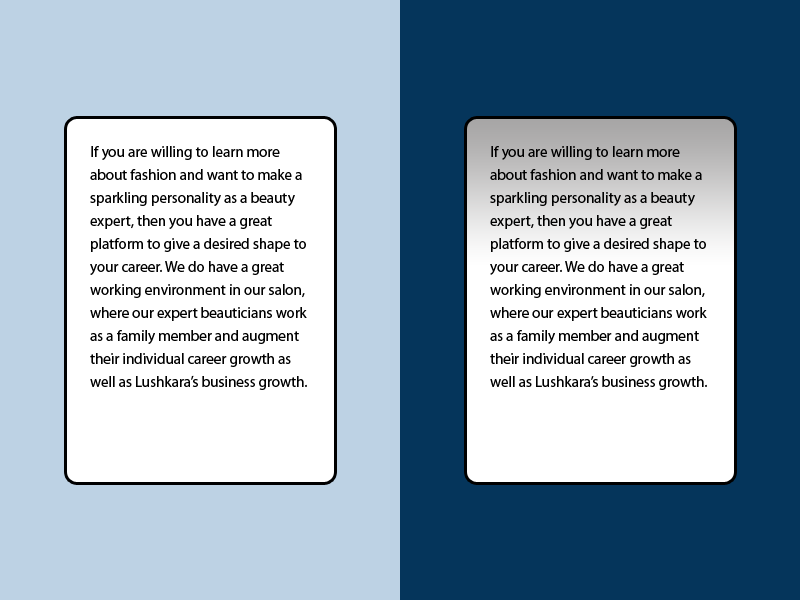
<style>
.page{position:relative;width:800px;height:600px;background:#ffffff}
.page>*{position:absolute;margin:0}
.t1{font:15px/23px "MyriadPro-Regular";color:#000000}
</style>
<div class="page">
<p class="t1" style="left:90px;top:146px;width:217px;height:244px">If you are willing to learn more about fashion and want to make a sparkling personality as a beauty expert, then you have a great platform to give a desired shape to your career. We do have a great working environment in our salon, where our expert beauticians work as a family member and augment their individual career growth as well as Lushkara’s business growth.</p>
<p class="t1" style="left:490px;top:146px;width:217px;height:244px">If you are willing to learn more about fashion and want to make a sparkling personality as a beauty expert, then you have a great platform to give a desired shape to your career. We do have a great working environment in our salon, where our expert beauticians work as a family member and augment their individual career growth as well as Lushkara’s business growth.</p>
</div>
